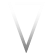
<style>
.page{position:relative;width:53px;height:54px;background:#ffffff}
.page>*{position:absolute;margin:0}
.t1{font:72px "Megrim";font-weight:bold}
</style>
<div class="page">
<p class="t1" style="left:7px;top:1px;width:38px;height:52px">V</p>
</div>
